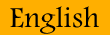
<style>
.page{position:relative;width:110px;height:35px;background:#ffaf00}
.page>*{position:absolute;margin:0}
.t1{font:30px "MitraNormal";color:#000000}
</style>
<div class="page">
<p class="t1" style="left:10px;top:6px;width:89px;height:28px">English</p>
</div>
